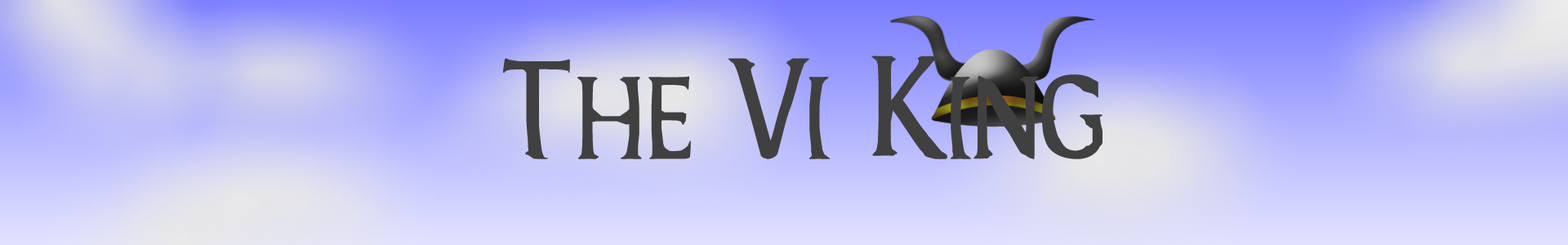
<style>
.page{position:relative;width:1568px;height:245px}
.page>*{position:absolute;margin:0}
.t1{font:149.7px "EndOfAnthropocene-Regular";color:#404040}
</style>
<div class="page">
<p class="t1" style="left:503px;top:56px;width:599px;height:103px">The Vi King</p>
</div>
